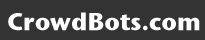
<style>
.page{position:relative;width:205px;height:40px;background:#333333}
.page>*{position:absolute;margin:0}
.t1{font:24px "StoneSansITC-Bold";color:#ffffff}
</style>
<div class="page">
<p class="t1" style="left:8px;top:12px;width:192px;height:19px">CrowdBots.com</p>
</div>
